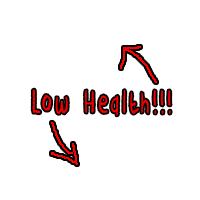
<style>
.page{position:relative;width:200px;height:200px;background:#ffffff}
.page>*{position:absolute;margin:0}
.t1{font:35.8px "DKCrayonCrumble";letter-spacing:0.159em;color:#ff0000;scale:0.64 1}
</style>
<div class="page">
<p class="t1" style="left:32px;top:89px;width:139px;height:27px">Low Health!!!</p>
</div>
